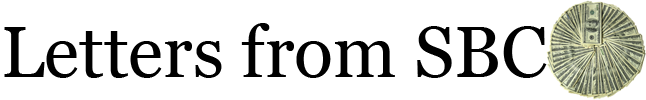
<style>
.page{position:relative;width:646px;height:100px;background:#ffffff}
.page>*{position:absolute;margin:0}
.t1{font:72px "Georgia";color:#000000}
</style>
<div class="page">
<p class="t1" style="left:4px;top:23px;width:543px;height:55px">Letters from SBC</p>
</div>
